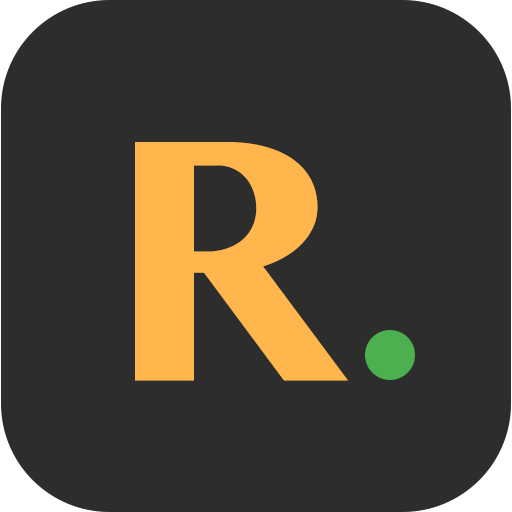
<style>
.page{position:relative;width:512px;height:512px;background:#2d2d2d}
.page>*{position:absolute;margin:0}
.t1{font:360px "MalayalamMN-Bold";color:#ffb74d}
</style>
<div class="page">
<p class="t1" style="left:135px;top:142px;width:213px;height:239px">R</p>
</div>
